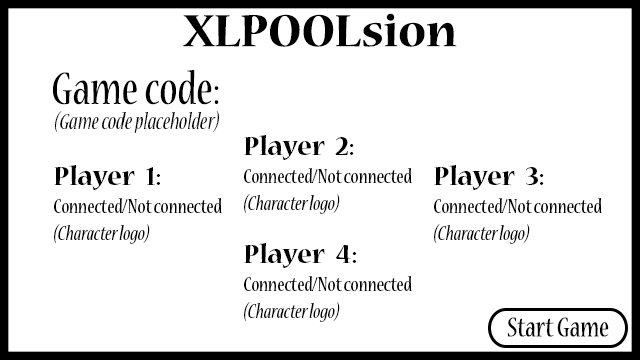
<style>
.page{position:relative;width:640px;height:360px;background:#ffffff}
.page>*{position:absolute;margin:0}
.t1{font:50px "NuevaStd-Bold";color:#000000}
.t2{font:12px/72.8px "NuevaStd-Cond";color:#000000}
.t3{font:25px "NuevaStd-CondItalic";color:#000000}
.t4{font:22px/63.9px "NuevaStd-Cond";color:#000000}
.t5{font:29.3px/63.9px "NuevaStd-Bold";color:#000000}
.t6{font:22px/63.9px "NuevaStd-CondItalic";color:#000000}
.t7{font:30px "NuevaStd-Cond";color:#000000}
</style>
<div class="page">
<p class="t1" style="left:183px;top:13px;width:274px;height:34px">XLPOOLsion</p>
<p class="t2" style="left:53px;top:69px;width:166px;height:36px">Game code:</p>
<p class="t3" style="left:55px;top:111px;width:164px;height:22px">(Game code placeholder)</p>
<p class="t4" style="left:244px;top:135px;width:168px;height:79px"><span class="t5">Player  2:<br></span>Connected/Not connected<br><span class="t6">(Character logo)</span></p>
<p class="t4" style="left:54px;top:165px;width:168px;height:79px"><span class="t5">Player  1:<br></span>Connected/Not connected<br><span class="t6">(Character logo)</span></p>
<p class="t4" style="left:434px;top:165px;width:168px;height:79px"><span class="t5">Player  3:<br></span>Connected/Not connected<br><span class="t6">(Character logo)</span></p>
<p class="t4" style="left:244px;top:243px;width:168px;height:79px"><span class="t5">Player  4:<br></span>Connected/Not connected<br><span class="t6">(Character logo)</span></p>
<p class="t7" style="left:507px;top:317px;width:102px;height:20px">Start Game</p>
</div>
